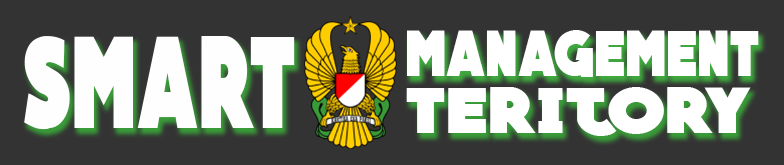
<style>
.page{position:relative;width:784px;height:165px;background:#333333}
.page>*{position:absolute;margin:0}
.t1{font:79.4px "QUARTZOdemo-Bold";letter-spacing:0.02em;color:#ffffff;scale:0.83 1}
.t2{font:158.7px "QUARTZOdemo-Bold";letter-spacing:0.02em;color:#fffefe;scale:0.65 1}
.t3{font:79.4px "QUARTZOdemo-Bold";letter-spacing:0.02em;color:#ffffff;scale:1.12 1}
</style>
<div class="page">
<p class="t1" style="left:407px;top:30px;width:352px;height:47px">management</p>
<p class="t2" style="left:24px;top:36px;width:271px;height:94px">smart</p>
<p class="t3" style="left:406px;top:87px;width:345px;height:49px">teritory</p>
</div>
